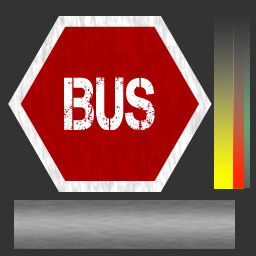
<style>
.page{position:relative;width:256px;height:256px;background:#333333}
.page>*{position:absolute;margin:0}
.t1{font:74.5px "Captureit";color:#ffffff;scale:0.7 1}
</style>
<div class="page">
<p class="t1" style="left:64px;top:77px;width:91px;height:53px">BUS</p>
</div>
